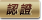
<style>
.page{position:relative;width:42px;height:20px}
.page>*{position:absolute;margin:0}
.t1{font:12px "MicrosoftJhengHeiRegular";letter-spacing:0.1em;font-weight:bold;font-style:italic}
</style>
<div class="page">
<p class="t1" style="left:6px;top:3px;width:26px;height:12px">認證</p>
<p class="t1" style="left:7px;top:3px;width:26px;height:12px">認證</p>
<p class="t1" style="left:7px;top:3px;width:26px;height:12px">認證</p>
<p class="t1" style="left:7px;top:3px;width:26px;height:12px">認證</p>
<p class="t1" style="left:7px;top:3px;width:26px;height:12px">認證</p>
</div>
